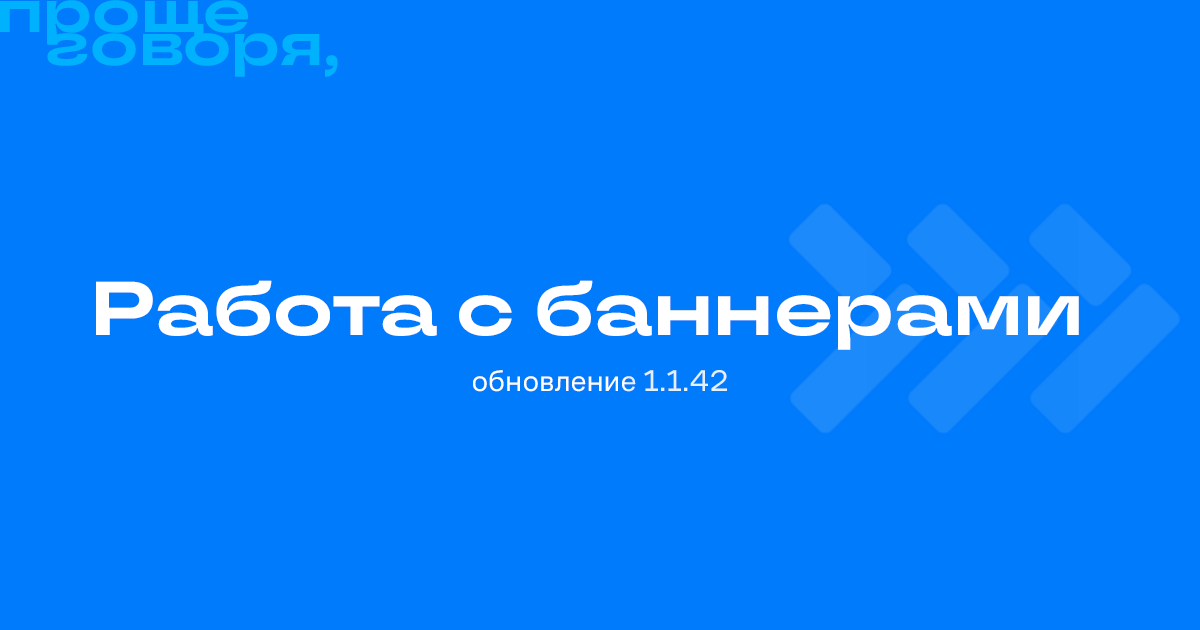
<style>
.page{position:relative;width:1200px;height:630px;background:#007bfb}
.page>*{position:absolute;margin:0}
.t1{font:61px/33px "TTTravelsNext-Bd";color:#00b1fd}
.t2{font:76.2px "TTTravelsNext-Bd";color:#ffffff}
.t3{font:30.5px "CoFoSans-Regular";color:#ffffff}
</style>
<div class="page">
<p class="t1" style="left:0px;top:0px;width:338px;height:77px">проще<br>   говоря,</p>
<p class="t2" style="left:96px;top:280px;width:983px;height:70px">Работа с баннерами</p>
<p class="t3" style="left:473px;top:370px;width:254px;height:22px">обновление 1.1.42</p>
</div>
